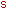
<style>
.page{position:relative;width:16px;height:16px;background:#ffffff}
.page>*{position:absolute;margin:0}
.t1{font:9.8px "ArialMT";color:#bc0101}
</style>
<div class="page">
<p class="t1" style="left:1px;top:1px;width:5px;height:7px">S</p>
</div>
